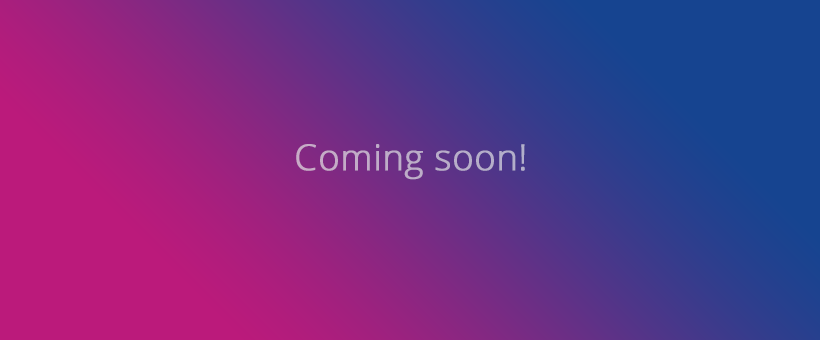
<style>
.page{position:relative;width:820px;height:340px}
.page>*{position:absolute;margin:0}
.t1{font:36px "OpenSans-Light";color:#bdacc8;font-weight:bold}
</style>
<div class="page">
<p class="t1" style="left:296px;top:144px;width:229px;height:36px">Coming soon!</p>
</div>
